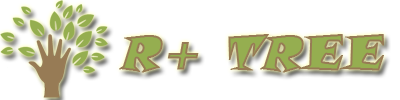
<style>
.page{position:relative;width:400px;height:100px;background:#ffffff}
.page>*{position:absolute;margin:0}
.t1{font:48px "SnapITC-Regular";font-weight:bold;font-style:italic}
</style>
<div class="page">
<p class="t1" style="left:119px;top:34px;width:265px;height:39px">R+ TREE</p>
</div>
